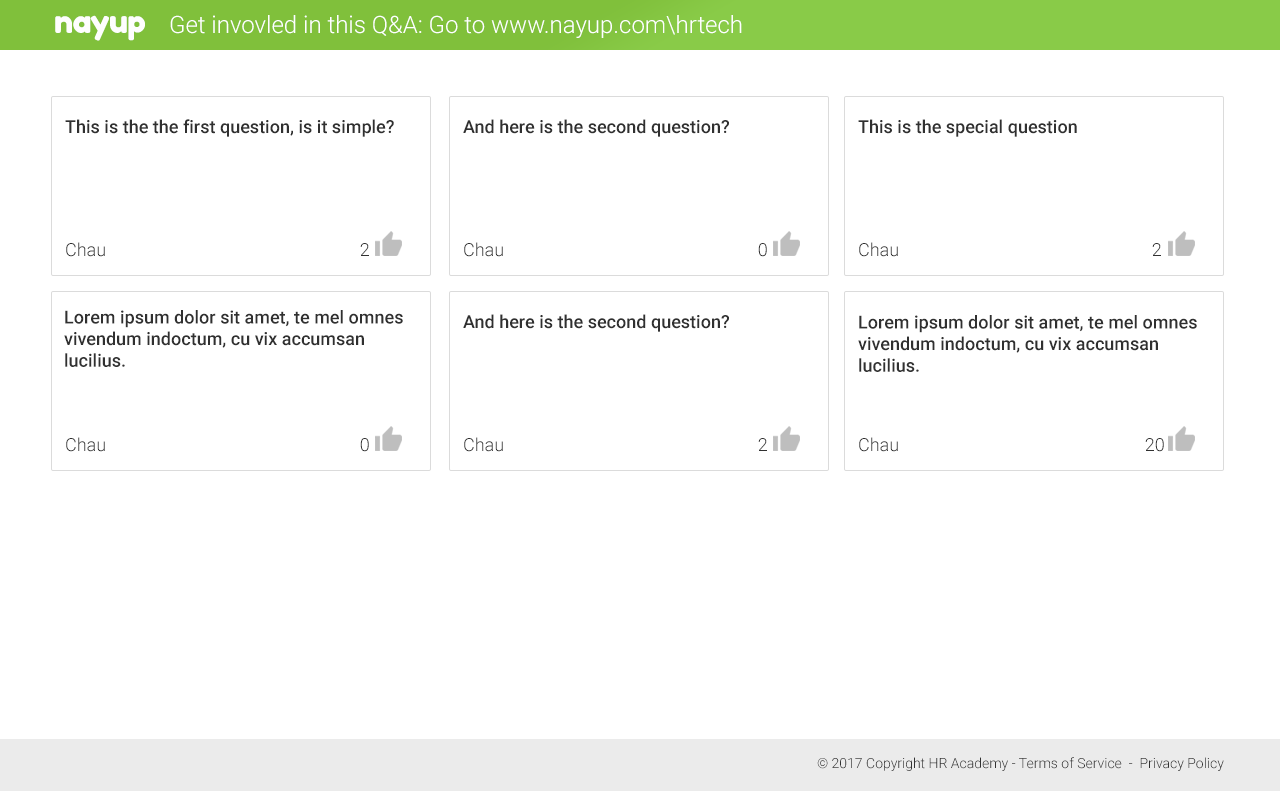
<style>
.page{position:relative;width:1280px;height:792px;background:#ffffff}
.page>*{position:absolute;margin:0}
.t1{font:32px "FredokaOne-Regular";letter-spacing:-0.025em;color:#fefefe}
.t2{font:24px "Roboto-Light";color:#ffffff}
.t3{font:18px "Roboto-Medium";color:#303030}
.t4{font:18px "Roboto-Light";color:#303030}
.t5{font:14px "Roboto-Light";color:#303030}
</style>
<div class="page">
<p class="t1" style="left:55px;top:15px;width:90px;height:26px">nayup</p>
<p class="t2" style="left:170px;top:15px;width:572px;height:23px">Get invovled in this Q&amp;A: Go to www.nayup.com\hrtech</p>
<p class="t3" style="left:65px;top:119px;width:329px;height:18px">This is the the first question, is it simple?</p>
<p class="t3" style="left:463px;top:119px;width:266px;height:18px">And here is the second question?</p>
<p class="t3" style="left:858px;top:119px;width:219px;height:18px">This is the special question</p>
<p class="t4" style="left:66px;top:242px;width:39px;height:15px">Chau</p>
<p class="t4" style="left:360px;top:243px;width:9px;height:13px">2</p>
<p class="t4" style="left:464px;top:242px;width:39px;height:15px">Chau</p>
<p class="t4" style="left:758px;top:243px;width:9px;height:14px">0</p>
<p class="t4" style="left:859px;top:242px;width:39px;height:15px">Chau</p>
<p class="t4" style="left:1152px;top:243px;width:9px;height:13px">2</p>
<p class="t3" style="left:64px;top:310px;width:339px;height:57px">Lorem ipsum dolor sit amet, te mel omnes vivendum indoctum, cu vix accumsan lucilius.</p>
<p class="t3" style="left:463px;top:314px;width:266px;height:18px">And here is the second question?</p>
<p class="t3" style="left:858px;top:315px;width:339px;height:57px">Lorem ipsum dolor sit amet, te mel omnes vivendum indoctum, cu vix accumsan lucilius.</p>
<p class="t4" style="left:66px;top:437px;width:39px;height:15px">Chau</p>
<p class="t4" style="left:360px;top:438px;width:9px;height:14px">0</p>
<p class="t4" style="left:464px;top:437px;width:39px;height:15px">Chau</p>
<p class="t4" style="left:758px;top:438px;width:9px;height:13px">2</p>
<p class="t4" style="left:859px;top:437px;width:39px;height:15px">Chau</p>
<p class="t4" style="left:1145px;top:438px;width:19px;height:14px">20</p>
<p class="t5" style="left:817px;top:757px;width:407px;height:14px">© 2017 Copyright HR Academy - Terms of Service  -  Privacy Policy</p>
</div>
